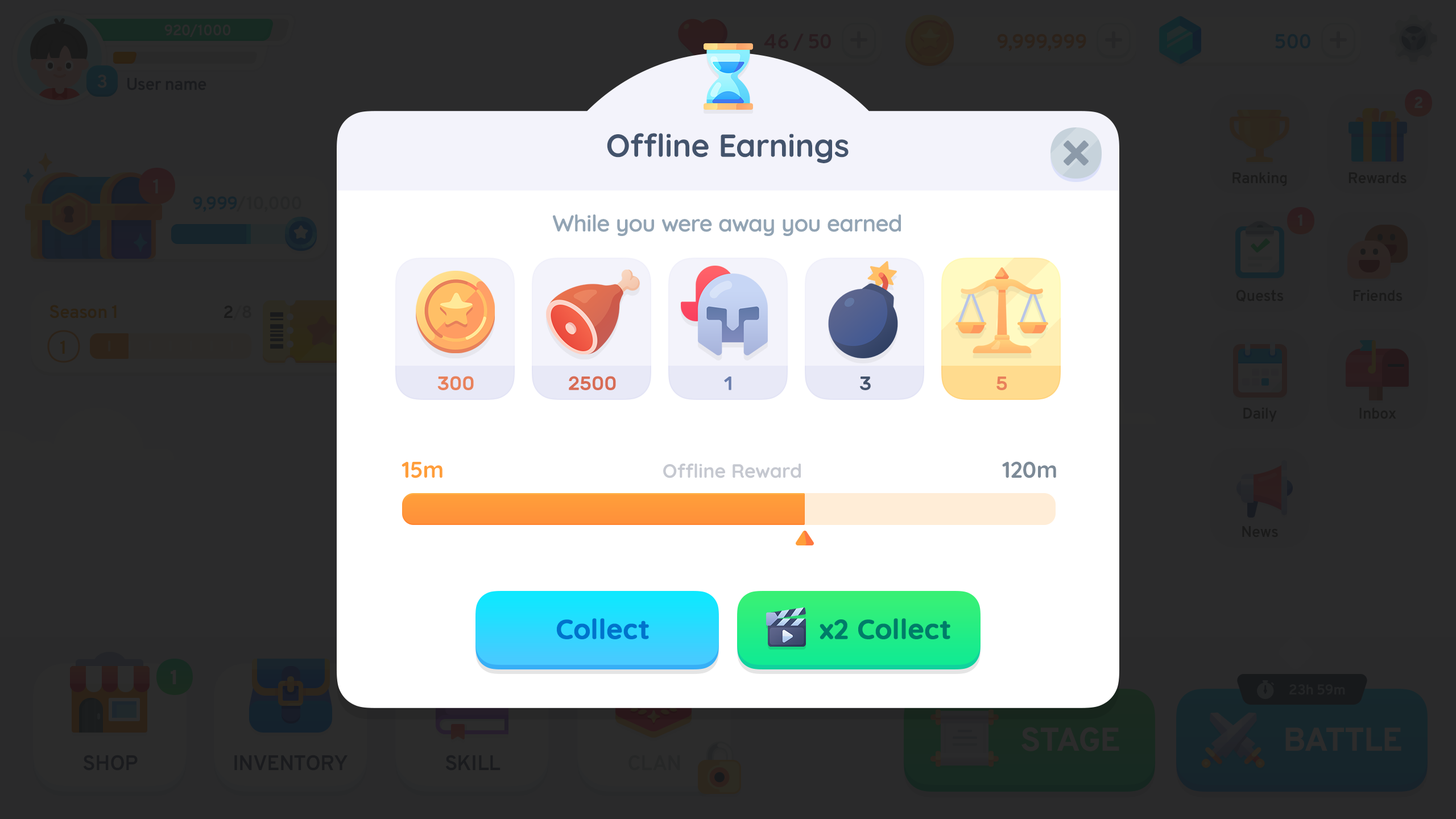
<style>
.page{position:relative;width:1456px;height:819px;background:#2b2b2c}
.page>*{position:absolute;margin:0}
.t1{font:31.8px "Quicksand-Bold";color:#43536c}
.t2{font:22.7px "Quicksand-SemiBold";letter-spacing:-0.035em;color:#92a4b4;font-weight:bold}
.t3{font:19.3px "Rubik-Medium";color:#e8815b}
.t4{font:19.3px "Rubik-Medium";color:#d86c55}
.t5{font:19.3px "Rubik-Medium";color:#697dad}
.t6{font:19.3px "Rubik-Medium";color:#43536c}
.t7{font:22.7px "Quicksand-Bold";color:#ff9e3a}
.t8{font:22.7px "Quicksand-Bold";color:#7c8a97}
.t9{font:19.3px "Quicksand-Bold";color:#c5c8d0}
.t10{font:27.3px "Quicksand-Bold";color:#0073cc;font-weight:bold}
.t11{font:27.3px "Quicksand-Bold";color:#007c69;font-weight:bold}
</style>
<div class="page">
<p class="t1" style="left:607px;top:133px;width:242px;height:30px">Offline Earnings</p>
<p class="t2" style="left:553px;top:214px;width:348px;height:22px">While you were away you earned</p>
<p class="t3" style="left:437px;top:376px;width:37px;height:14px">300</p>
<p class="t4" style="left:569px;top:376px;width:47px;height:14px">2500</p>
<p class="t5" style="left:724px;top:377px;width:7px;height:13px">1</p>
<p class="t6" style="left:860px;top:377px;width:11px;height:13px">3</p>
<p class="t3" style="left:996px;top:377px;width:11px;height:13px">5</p>
<p class="t7" style="left:402px;top:462px;width:40px;height:16px">15m</p>
<p class="t8" style="left:1002px;top:461px;width:54px;height:17px">120m</p>
<p class="t9" style="left:663px;top:464px;width:138px;height:14px">Offline Reward</p>
<p class="t10" style="left:557px;top:618px;width:92px;height:21px">Collect</p>
<p class="t11" style="left:820px;top:618px;width:130px;height:21px">x2 Collect</p>
</div>
